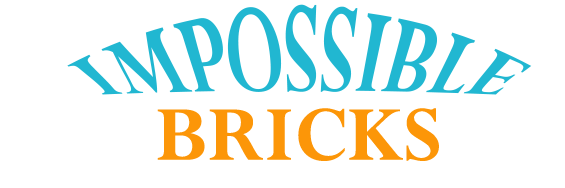
<style>
.page{position:relative;width:565px;height:188px;background:#ffffff}
.page>*{position:absolute;margin:0}
.t1{font:71.4px "Perpetua-Bold";color:#21b7d1}
.t2{font:85.4px "Perpetua-Bold";color:#fc9608}
</style>
<div class="page">
<p class="t1" style="left:67px;top:4px;width:465px;height:91px">IMPOSSIBLE</p>
<p class="t2" style="left:157px;top:108px;width:282px;height:53px">BRICKS</p>
</div>
